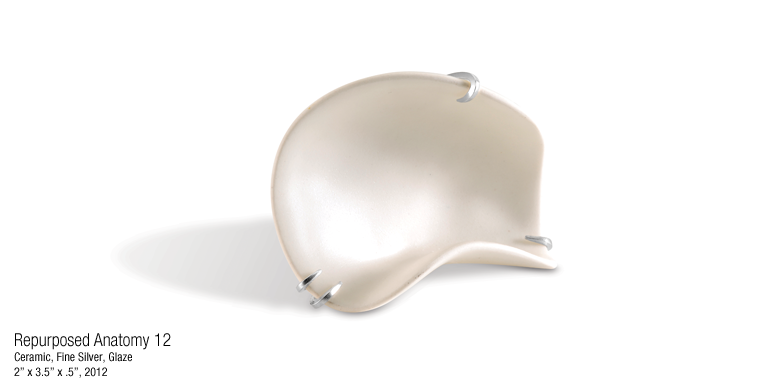
<style>
.page{position:relative;width:780px;height:390px;background:#ffffff}
.page>*{position:absolute;margin:0}
.t1{font:12px/15px "HelveticaNeue-Condensed";color:#000000}
.t2{font:18px/14px "HelveticaNeue-LightCond";color:#000000}
</style>
<div class="page">
<p class="t1" style="left:14px;top:333px;width:157px;height:45px"><span class="t2">Repurposed Anatomy 12<br></span>Ceramic, Fine Silver, Glaze<br>2” x 3.5” x .5”, 2012</p>
</div>
